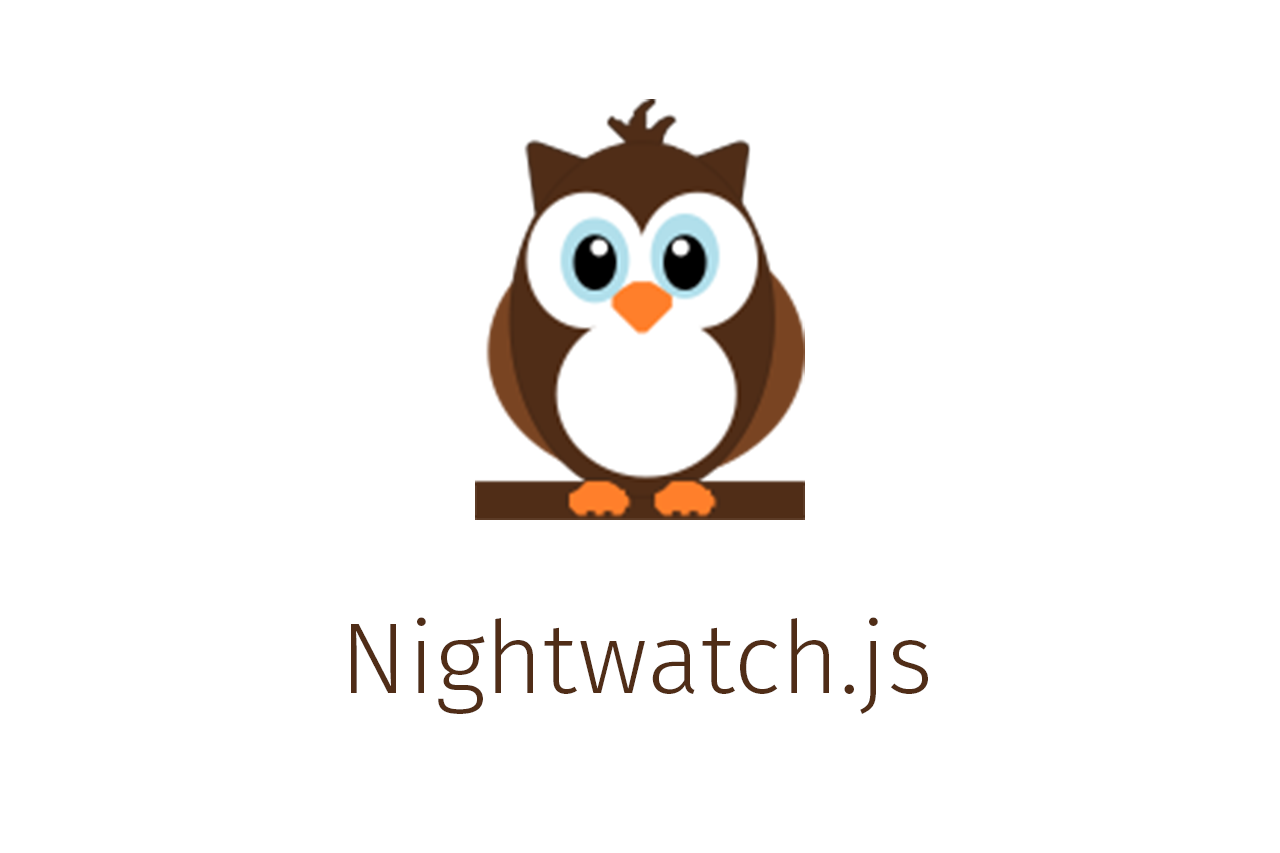
<style>
.page{position:relative;width:1280px;height:853px;background:#ffffff}
.page>*{position:absolute;margin:0}
.t1{font:100px "FiraSans-Light";color:#502d17}
</style>
<div class="page">
<p class="t1" style="left:351px;top:617px;width:577px;height:97px">Nightwatch.js</p>
</div>
